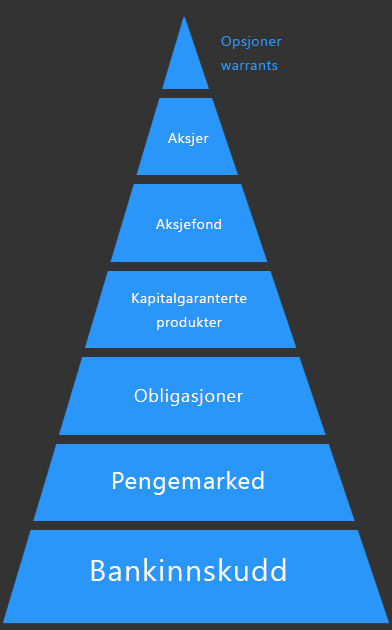
<style>
.page{position:relative;width:392px;height:630px;background:#333333}
.page>*{position:absolute;margin:0}
.t1{font:14px/24px "SegoeUI";letter-spacing:0.04em;color:#2b96fa}
.t2{font:14px "SegoeUI";letter-spacing:0.04em;color:#ffffff}
.t3{font:14px/24px "SegoeUI";letter-spacing:0.04em;color:#ffffff}
.t4{font:18px "SegoeUI";letter-spacing:0.04em;color:#ffffff}
.t5{font:24px "SegoeUI";letter-spacing:0.04em;color:#ffffff}
.t6{font:30px "SegoeUI";letter-spacing:0.04em;color:#ffffff}
</style>
<div class="page">
<p class="t1" style="left:221px;top:36px;width:61px;height:34px">Opsjoner<br>warrants</p>
<p class="t2" style="left:168px;top:133px;width:41px;height:13px">Aksjer</p>
<p class="t2" style="left:156px;top:219px;width:65px;height:13px">Aksjefond</p>
<p class="t3" style="left:132px;top:293px;width:115px;height:37px;text-align:center">Kapitalgaranterte<br>produkter</p>
<p class="t4" style="left:134px;top:388px;width:109px;height:18px">Obligasjoner</p>
<p class="t5" style="left:113px;top:471px;width:151px;height:24px">Pengemarked</p>
<p class="t6" style="left:91px;top:558px;width:195px;height:23px">Bankinnskudd</p>
</div>
